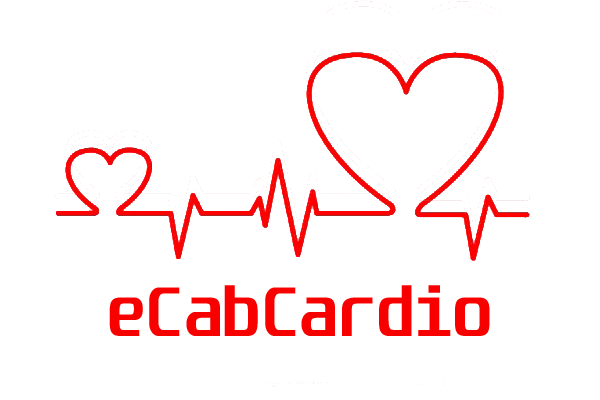
<style>
.page{position:relative;width:600px;height:400px;background:#ffffff}
.page>*{position:absolute;margin:0}
.t1{font:60px "Unispace-Bold";color:#f80000;scale:1.05 1}
</style>
<div class="page">
<p class="t1" style="left:109px;top:285px;width:381px;height:51px">eCabCardio</p>
</div>
